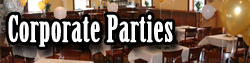
<style>
.page{position:relative;width:250px;height:63px}
.page>*{position:absolute;margin:0}
.t1{font:34.9px "BirchStd";letter-spacing:0.01em;color:#fdfcfc;font-weight:bold}
</style>
<div class="page">
<p class="t1" style="left:8px;top:14px;width:165px;height:33px">Corporate Parties</p>
</div>
